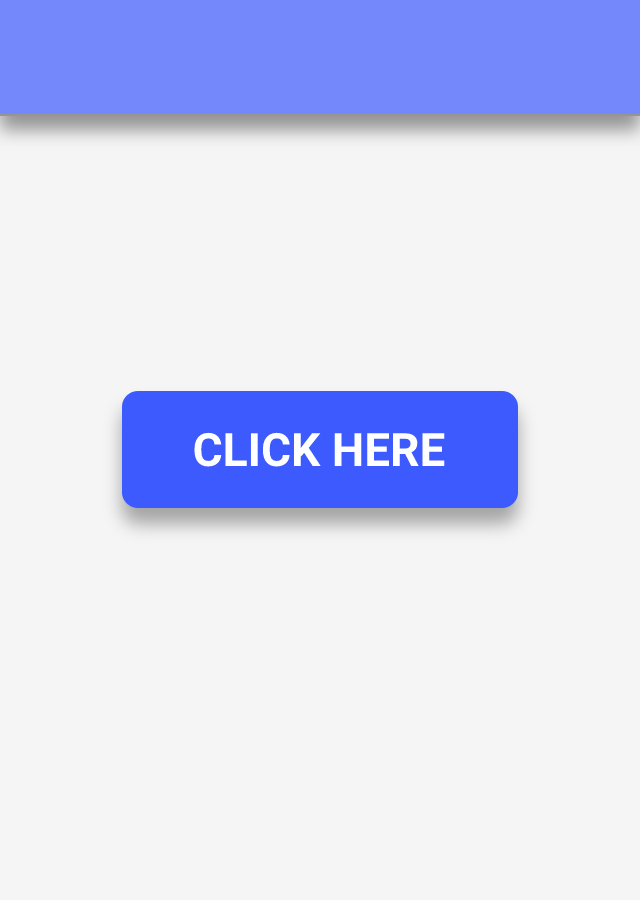
<style>
.page{position:relative;width:640px;height:900px;background:#f5f5f5}
.page>*{position:absolute;margin:0}
.t1{font:46px "Roboto-Bold";color:#ffffff}
</style>
<div class="page">
<p class="t1" style="left:194px;top:432px;width:251px;height:35px">CLICK HERE</p>
</div>
